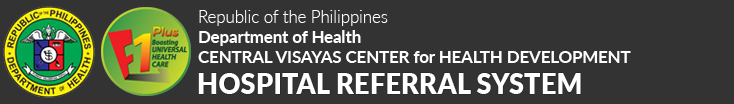
<style>
.page{position:relative;width:734px;height:104px;background:#333333}
.page>*{position:absolute;margin:0}
.t1{font:16.8px "Lato-Bold";color:#ffffff}
.t2{font:16.8px "Lato-Light";color:#ffffff}
.t3{font:27.6px "Lato-Black";color:#ffffff}
</style>
<div class="page">
<p class="t1" style="left:198px;top:10px;width:433px;height:53px"><span class="t2">Republic of the Philippines<br></span>Department of Health<br>CENTRAL VISAYAS CENTER for HEALTH DEVELOPMENT</p>
<p class="t3" style="left:198px;top:73px;width:383px;height:21px">HOSPITAL REFERRAL SYSTEM</p>
</div>
